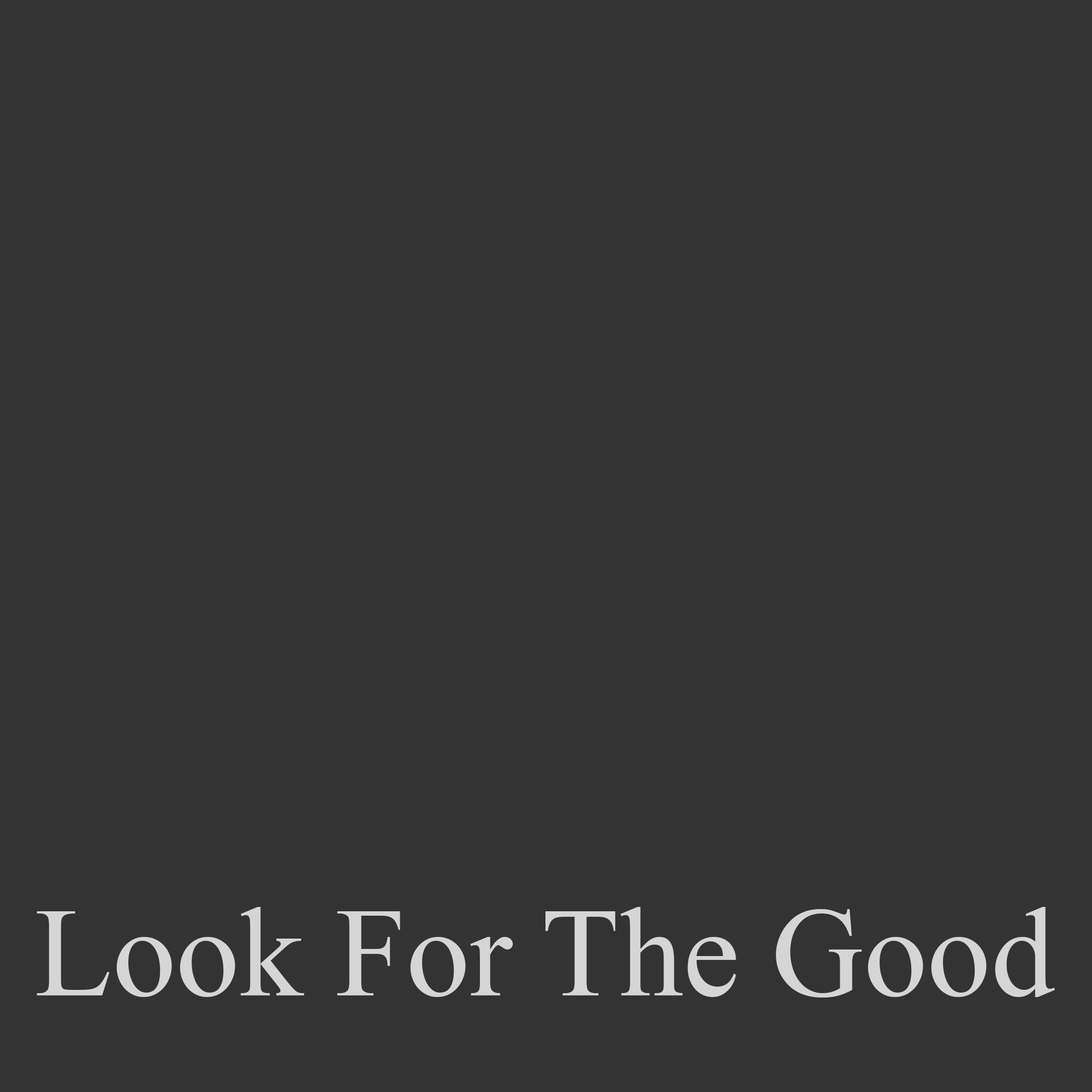
<style>
.page{position:relative;width:1092px;height:1092px;background:#333333}
.page>*{position:absolute;margin:0}
.t1{font:127.4px "MongolianBaiti";color:#d5d5d5}
</style>
<div class="page">
<p class="t1" style="left:37px;top:907px;width:1018px;height:91px">Look For The Good</p>
</div>
